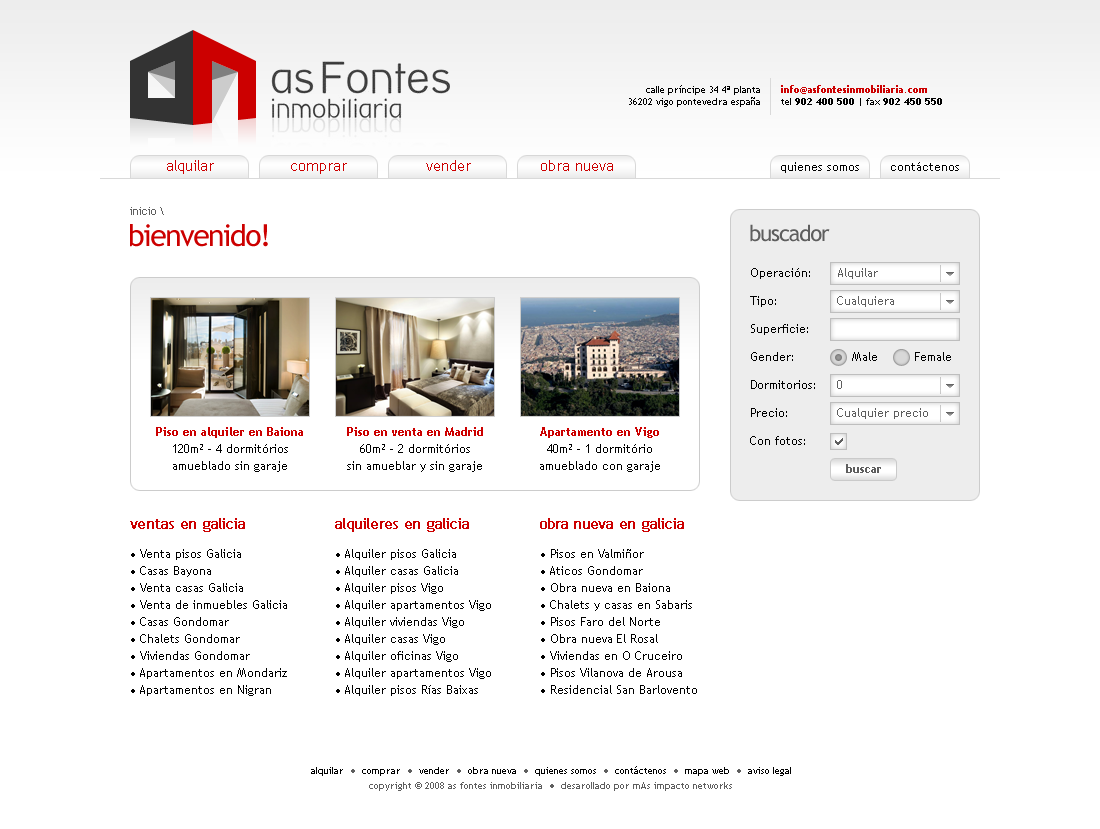
<style>
.page{position:relative;width:1100px;height:829px;background:#ffffff}
.page>*{position:absolute;margin:0}
.t1{font:10px "TrebuchetMS";color:#000000}
.t2{font:10px "TrebuchetMS-Bold";color:#cc0000}
.t3{font:10px "TrebuchetMS-Bold";color:#000000}
.t4{font:15px "TrebuchetMS";color:#cc0000}
.t5{font:12px "TrebuchetMS";color:#000000}
.t6{font:11px "TrebuchetMS";color:#5e5e5e}
.t7{font:30px "TrebuchetMS";letter-spacing:-0.05em;color:#cc0000}
.t8{font:22px "TrebuchetMS";letter-spacing:-0.05em;color:#5e5e5e}
.t9{font:12px/28px "TrebuchetMS";color:#000000}
.t10{font:12px/28px "TrebuchetMS"}
.t11{font:12px/17px "TrebuchetMS";color:#000000}
.t12{font:12px/17px "TrebuchetMS-Bold";color:#cc0000}
.t13{font:15px "TrebuchetMS";letter-spacing:-0.05em;color:#cc0000;font-weight:bold}
.t14{font:15px "TrebuchetMS";letter-spacing:-0.17em;color:#cc0000;font-weight:bold}
.t15{font:10px/17px "TrebuchetMS";color:#000000}
.t16{font:10px/15px "TrebuchetMS";color:#5e5e5e}
.t17{font:10px/15px "TrebuchetMS";color:#000000}
</style>
<div class="page">
<p class="t1" style="left:629px;top:85px;width:131px;height:22px;text-align:right">calle príncipe 34 4ª planta<br>36202 vigo pontevedra españa</p>
<p class="t2" style="left:781px;top:85px;width:161px;height:21px">info@asfontesinmobiliaria.com<br><span class="t1">tel </span><span class="t3">902 400 500</span><span class="t1"> | fax </span><span class="t3">902 450 550</span></p>
<p class="t4" style="left:167px;top:160px;width:47px;height:14px">alquilar</p>
<p class="t4" style="left:426px;top:160px;width:45px;height:11px">vender</p>
<p class="t4" style="left:541px;top:160px;width:72px;height:11px">obra nueva</p>
<p class="t4" style="left:291px;top:163px;width:56px;height:11px">comprar</p>
<p class="t5" style="left:781px;top:162px;width:78px;height:11px">quienes somos</p>
<p class="t5" style="left:891px;top:162px;width:68px;height:9px">contáctenos</p>
<p class="t6" style="left:130px;top:207px;width:34px;height:8px">inicio \</p>
<p class="t7" style="left:130px;top:224px;width:138px;height:23px">bienvenido!</p>
<p class="t8" style="left:750px;top:224px;width:80px;height:18px">buscador</p>
<p class="t9" style="left:750px;top:268px;width:60px;height:149px">Operación:<br>Tipo:<br>Superficie:<br>Gender:<br>Precio:<br>Con fotos:</p>
<p class="t10" style="left:837px;top:268px;width:91px;height:123px">Alquilar<br>Cualquiera<br> <br>0<br>Cualquier precio</p>
<p class="t5" style="left:852px;top:352px;width:99px;height:9px">Male         Female</p>
<p class="t11" style="left:156px;top:427px;width:147px;height:45px;text-align:center"><span class="t12">Piso en alquiler en Baiona<br></span>120m² - 4 dormitórios<br>amueblado sin garaje</p>
<p class="t11" style="left:347px;top:427px;width:136px;height:45px;text-align:center"><span class="t12">Piso en venta en Madrid<br></span>60m² - 2 dormitórios<br>sin amueblar y sin garaje</p>
<p class="t11" style="left:540px;top:427px;width:120px;height:45px;text-align:center"><span class="t12">Apartamento en Vigo<br></span>40m² - 1 dormitório<br>amueblado con garaje</p>
<p class="t13" style="left:130px;top:518px;width:115px;height:14px">ventas en galicia</p>
<p class="t13" style="left:335px;top:518px;width:134px;height:14px">alquileres en galicia</p>
<p class="t13" style="left:540px;top:518px;width:144px;height:14px">o<span class="t14">b</span>ra nueva en galicia</p>
<p class="t11" style="left:131px;top:549px;width:156px;height:147px"><span class="t15">●</span> Venta pisos Galicia<br><span class="t15">●</span> Casas Bayona<br><span class="t15">●</span> Venta casas Galicia<br><span class="t15">●</span> Venta de inmuebles Galicia<br><span class="t15">●</span> Casas Gondomar<br><span class="t15">●</span> Chalets Gondomar<br><span class="t15">●</span> Viviendas Gondomar<br><span class="t15">●</span> Apartamentos en Mondariz<br><span class="t15">●</span> Apartamentos en Nigran</p>
<p class="t11" style="left:336px;top:549px;width:155px;height:147px"><span class="t15">●</span> Alquiler pisos Galicia<br><span class="t15">●</span> Alquiler casas Galicia<br><span class="t15">●</span> Alquiler pisos Vigo<br><span class="t15">●</span> Alquiler apartamentos Vigo<br><span class="t15">●</span> Alquiler viviendas Vigo<br><span class="t15">●</span> Alquiler casas Vigo<br><span class="t15">●</span> Alquiler oficinas Vigo<br><span class="t15">●</span> Alquiler apartamentos Vigo<br><span class="t15">●</span> Alquiler pisos Rías Baixas</p>
<p class="t11" style="left:541px;top:549px;width:156px;height:145px"><span class="t15">●</span> Pisos en Valmiñor<br><span class="t15">●</span> Aticos Gondomar<br><span class="t15">●</span> Obra nueva en Baiona<br><span class="t15">●</span> Chalets y casas en Sabaris<br><span class="t15">●</span> Pisos Faro del Norte<br><span class="t15">●</span> Obra nueva El Rosal<br><span class="t15">●</span> Viviendas en O Cruceiro<br><span class="t15">●</span> Pisos Vilanova de Arousa<br><span class="t15">●</span> Residencial San Barlovento</p>
<p class="t16" style="left:311px;top:766px;width:480px;height:25px;text-align:center"><span class="t17">alquilar  </span>●<span class="t17">  comprar  </span>●<span class="t17">  vender  </span>●<span class="t17">  obra nueva  </span>●<span class="t17">  quienes somos  </span>●<span class="t17">  contáctenos  </span>●<span class="t17">  mapa web  </span>●<span class="t17">  aviso legal<br></span>copyright © 2008 as fontes inmobiliaria  ●  desarollado por mAs impacto networks</p>
</div>
